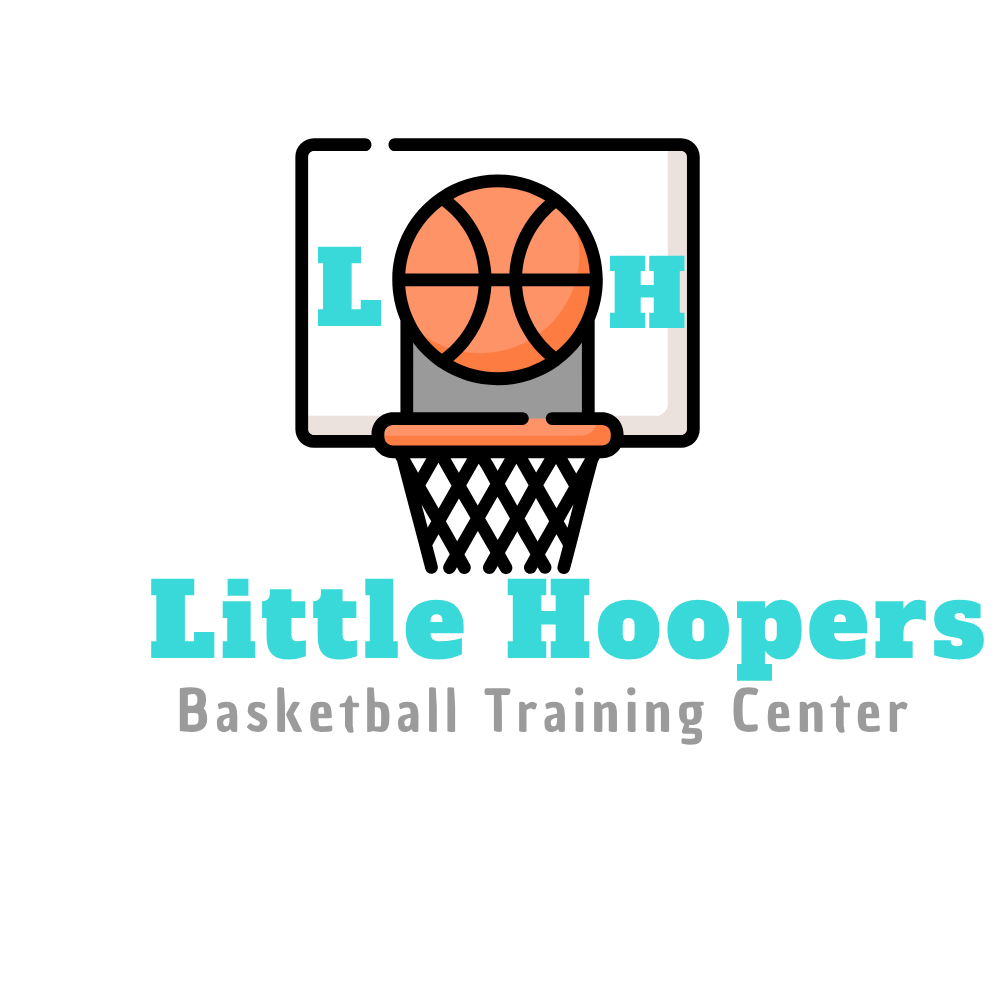
<style>
.page{position:relative;width:1000px;height:1000px;background:#ffffff}
.page>*{position:absolute;margin:0}
.t1{font:102px "AlfaSlabOne-Regular";letter-spacing:0.05em;color:#39d9d9}
.t2{font:93px "AlfaSlabOne-Regular";letter-spacing:0.05em;color:#39d9d9}
.t3{font:57px "ChauPhilomeneOne-Regular";letter-spacing:0.1em;color:#9b9b9b}
</style>
<div class="page">
<p class="t1" style="left:317px;top:246px;width:65px;height:80px">L</p>
<p class="t2" style="left:610px;top:255px;width:75px;height:73px">H</p>
<p class="t1" style="left:151px;top:578px;width:833px;height:103px">Little Hoopers</p>
<p class="t3" style="left:179px;top:687px;width:729px;height:58px">Basketball Training Center</p>
</div>
